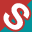
<style>
.page{position:relative;width:32px;height:32px;background:#bf3330}
.page>*{position:absolute;margin:0}
.t1{font:35.5px "HelveticaNeue-Bold";color:#ffffff}
</style>
<div class="page">
<p class="t1" style="left:3px;top:3px;width:27px;height:27px;rotate:41deg">S</p>
</div>
